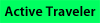
<style>
.page{position:relative;width:100px;height:23px;background:#00ff60}
.page>*{position:absolute;margin:0}
.t1{font:14px "MyriadPro-Semibold";color:#000000}
</style>
<div class="page">
<p class="t1" style="left:4px;top:6px;width:92px;height:10px">Active Traveler</p>
</div>
